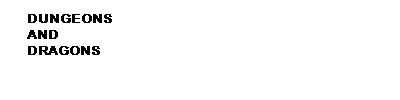
<style>
.page{position:relative;width:400px;height:100px;background:#ffffff}
.page>*{position:absolute;margin:0}
.t1{font:13.2px "ArialRoundedMTBold";color:#000000;font-weight:bold}
</style>
<div class="page">
<p class="t1" style="left:27px;top:14px;width:85px;height:41px">DUNGEONS <br>AND <br>DRAGONS</p>
</div>
